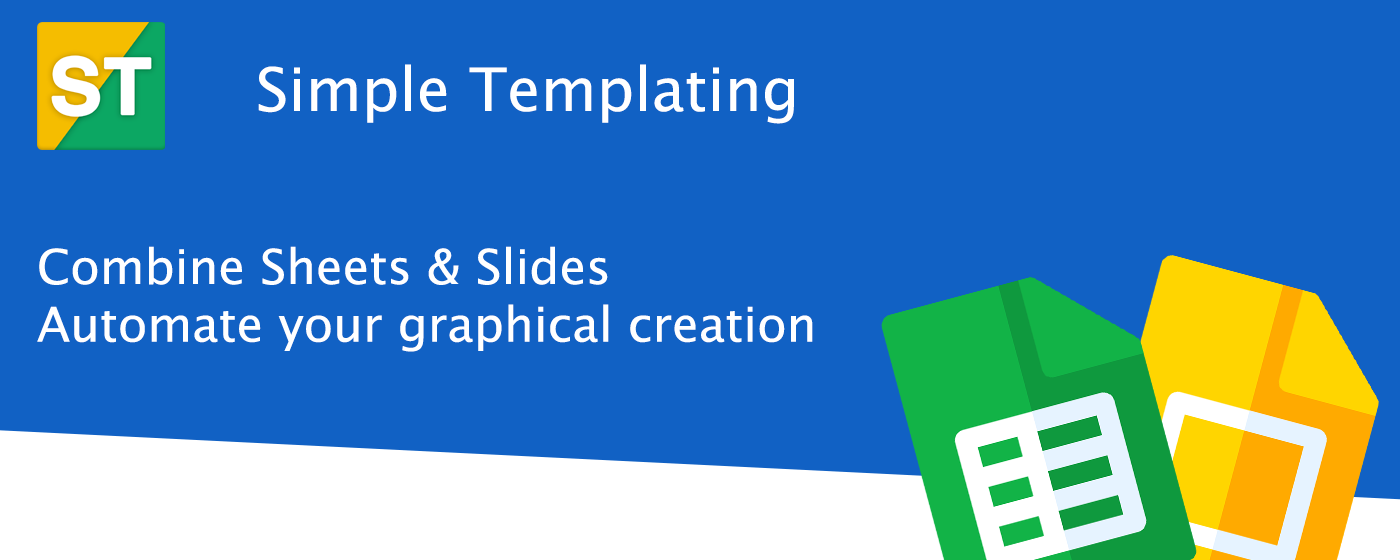
<style>
.page{position:relative;width:1400px;height:560px;background:#1161c4}
.page>*{position:absolute;margin:0}
.t1{font:60px "LucidaGrande";color:#ffffff}
.t2{font:48px "LucidaGrande";color:#ffffff}
</style>
<div class="page">
<p class="t1" style="left:258px;top:64px;width:536px;height:60px">Simple Templating</p>
<p class="t2" style="left:37px;top:246px;width:776px;height:106px">Combine Sheets &amp; Slides<br>Automate your graphical creation</p>
</div>
